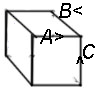
<style>
.page{position:relative;width:100px;height:100px;background:#ffffff}
.page>*{position:absolute;margin:0}
.t1{font:19.9px "Arial-ItalicMT";color:#000000}
</style>
<div class="page">
<p class="t1" style="left:59px;top:3px;width:23px;height:15px">B&lt;</p>
<p class="t1" style="left:40px;top:29px;width:24px;height:15px">A&gt;</p>
<p class="t1" style="left:83px;top:44px;width:12px;height:15px">C</p>
<p class="t1" style="left:76px;top:56px;width:8px;height:8px">^</p>
</div>
